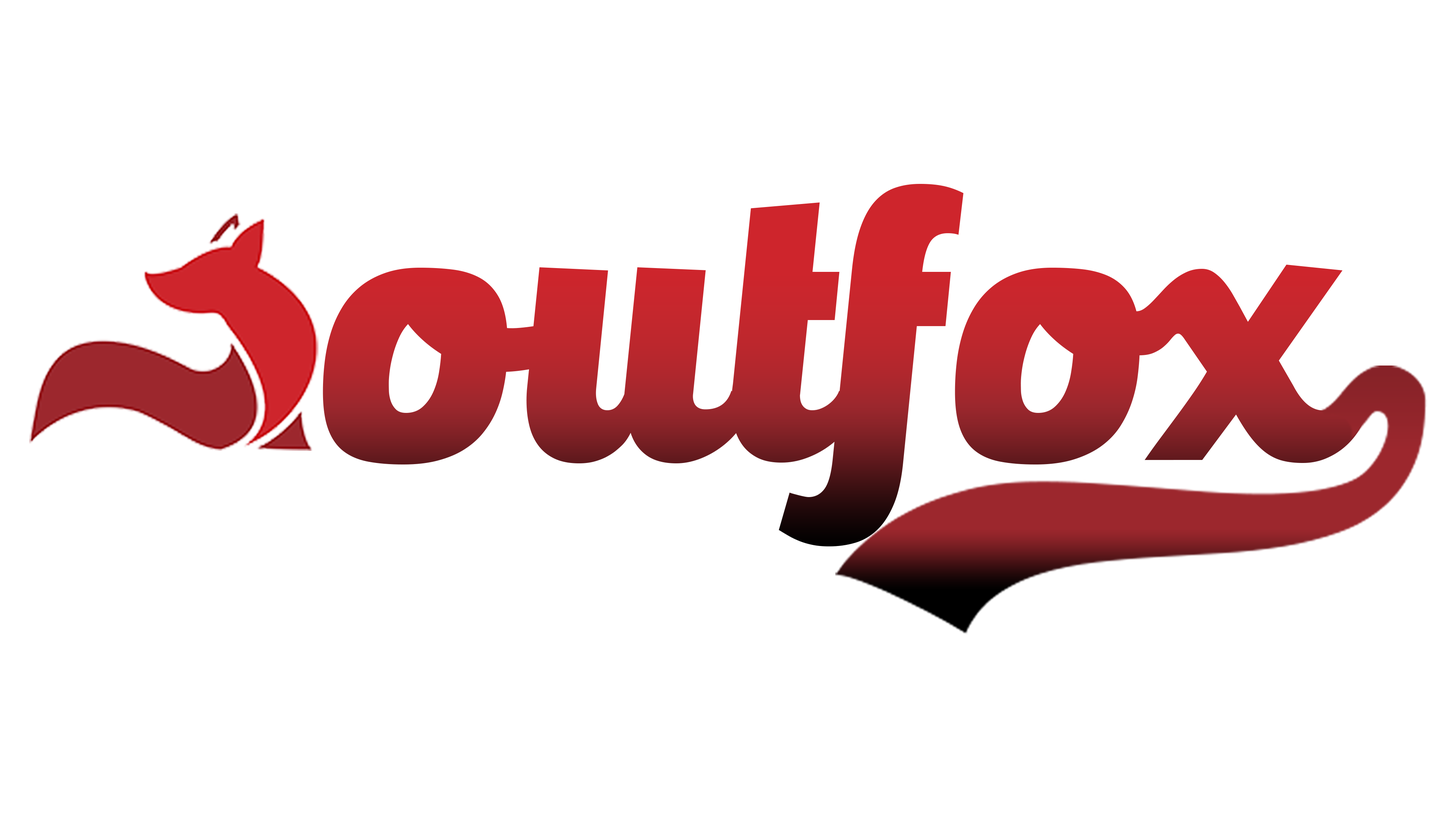
<style>
.page{position:relative;width:1456px;height:819px;background:#ffffff}
.page>*{position:absolute;margin:0}
.t1{font:359.3px "BullettoKilla"}
</style>
<div class="page">
<p class="t1" style="left:323px;top:184px;width:1043px;height:362px">outfox</p>
</div>
